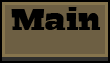
<style>
.page{position:relative;width:110px;height:63px;background:#6d5f43}
.page>*{position:absolute;margin:0}
.t1{font:32px "Bigfish-Black";color:#000000}
</style>
<div class="page">
<p class="t1" style="left:11px;top:7px;width:90px;height:23px">Main</p>
</div>
